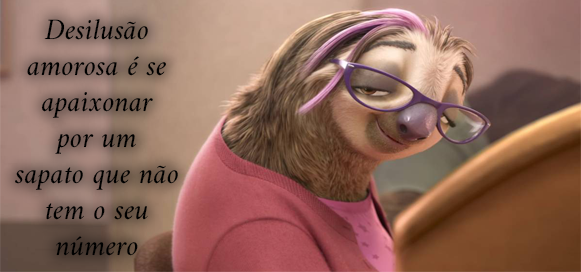
<style>
.page{position:relative;width:581px;height:272px}
.page>*{position:absolute;margin:0}
.t1{font:30px "Amiri-Slanted";color:#000000}
</style>
<div class="page">
<p class="t1" style="left:15px;top:19px;width:163px;height:237px;text-align:center">Desilusão   amorosa é se apaixonar    por um    sapato que não tem o seu número</p>
</div>
